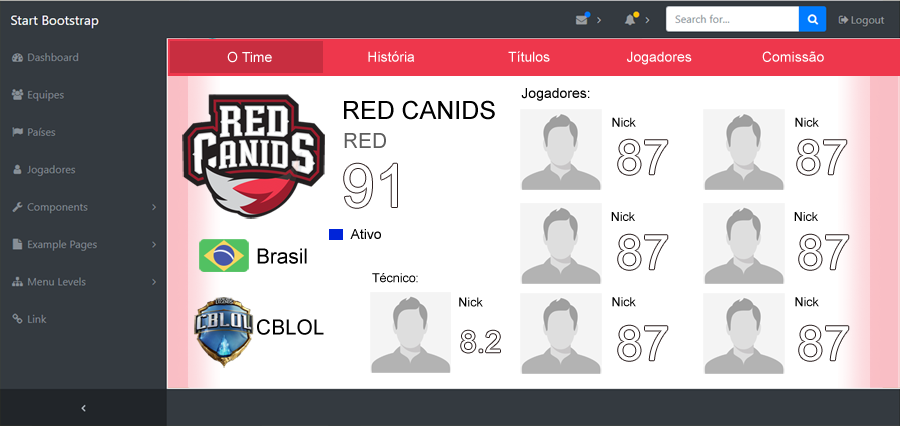
<style>
.page{position:relative;width:900px;height:426px;background:#ffffff}
.page>*{position:absolute;margin:0}
.t1{font:14px "ArialMT";color:#ffffff}
.t2{font:14px "ArialMT";color:#000000}
.t3{font:25px "ArialMT";color:#000000}
.t4{font:12.5px "ArialMT";color:#000000}
.t5{font:20.8px "ArialMT";color:#5e5e5e}
.t6{font:20.8px "ArialMT";color:#000000}
</style>
<div class="page">
<p class="t1" style="left:227px;top:51px;width:45px;height:12px">O Time</p>
<p class="t1" style="left:368px;top:51px;width:47px;height:11px">História</p>
<p class="t1" style="left:508px;top:51px;width:42px;height:11px">Títulos</p>
<p class="t1" style="left:627px;top:51px;width:65px;height:14px">Jogadores</p>
<p class="t1" style="left:762px;top:51px;width:62px;height:11px">Comissão</p>
<p class="t2" style="left:521px;top:88px;width:69px;height:13px">Jogadores:</p>
<p class="t3" style="left:344px;top:100px;width:151px;height:20px">RED CANIDS</p>
<p class="t4" style="left:612px;top:117px;width:24px;height:10px">Nick</p>
<p class="t4" style="left:795px;top:117px;width:24px;height:10px">Nick</p>
<p class="t5" style="left:344px;top:133px;width:42px;height:15px">RED</p>
<p class="t4" style="left:611px;top:212px;width:24px;height:9px">Nick</p>
<p class="t4" style="left:794px;top:212px;width:24px;height:9px">Nick</p>
<p class="t2" style="left:350px;top:229px;width:31px;height:10px">Ativo</p>
<p class="t6" style="left:257px;top:248px;width:50px;height:16px">Brasil</p>
<p class="t4" style="left:372px;top:273px;width:46px;height:10px">Técnico:</p>
<p class="t4" style="left:459px;top:297px;width:24px;height:10px">Nick</p>
<p class="t4" style="left:612px;top:297px;width:24px;height:10px">Nick</p>
<p class="t4" style="left:795px;top:297px;width:24px;height:10px">Nick</p>
<p class="t6" style="left:257px;top:319px;width:67px;height:16px">CBLOL</p>
</div>
